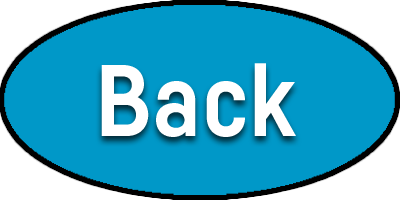
<style>
.page{position:relative;width:400px;height:200px;background:#0098c8}
.page>*{position:absolute;margin:0}
.t1{font:100px "Fabrikat-Bold";letter-spacing:0.01em;color:#ffffff}
</style>
<div class="page">
<p class="t1" style="left:101px;top:63px;width:195px;height:74px">Back</p>
</div>
